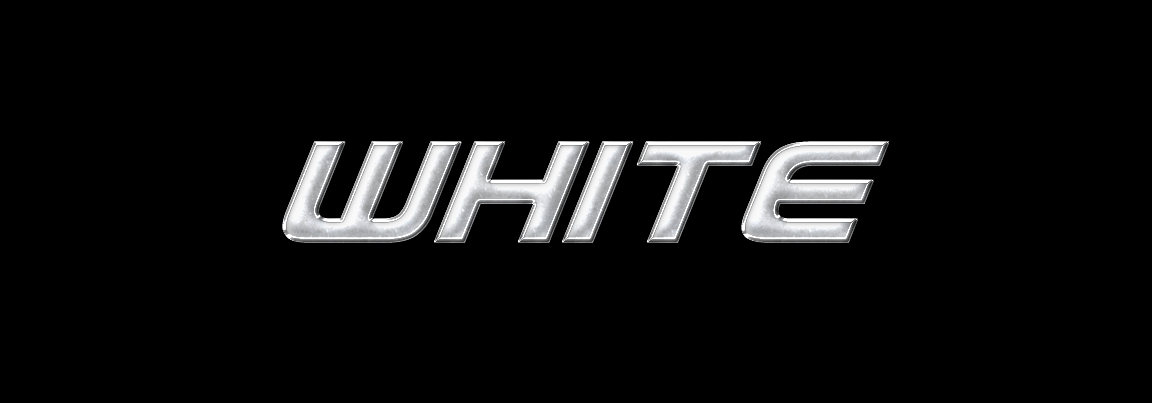
<style>
.page{position:relative;width:1152px;height:403px;background:#000000}
.page>*{position:absolute;margin:0}
.t1{font:172px "UsuziItalic";letter-spacing:-0.025em;font-weight:bold}
</style>
<div class="page">
<p class="t1" style="left:282px;top:141px;width:608px;height:102px">White</p>
<p class="t1" style="left:282px;top:141px;width:608px;height:102px">White</p>
<p class="t1" style="left:282px;top:141px;width:608px;height:102px">White</p>
<p class="t1" style="left:282px;top:141px;width:608px;height:102px">White</p>
</div>
